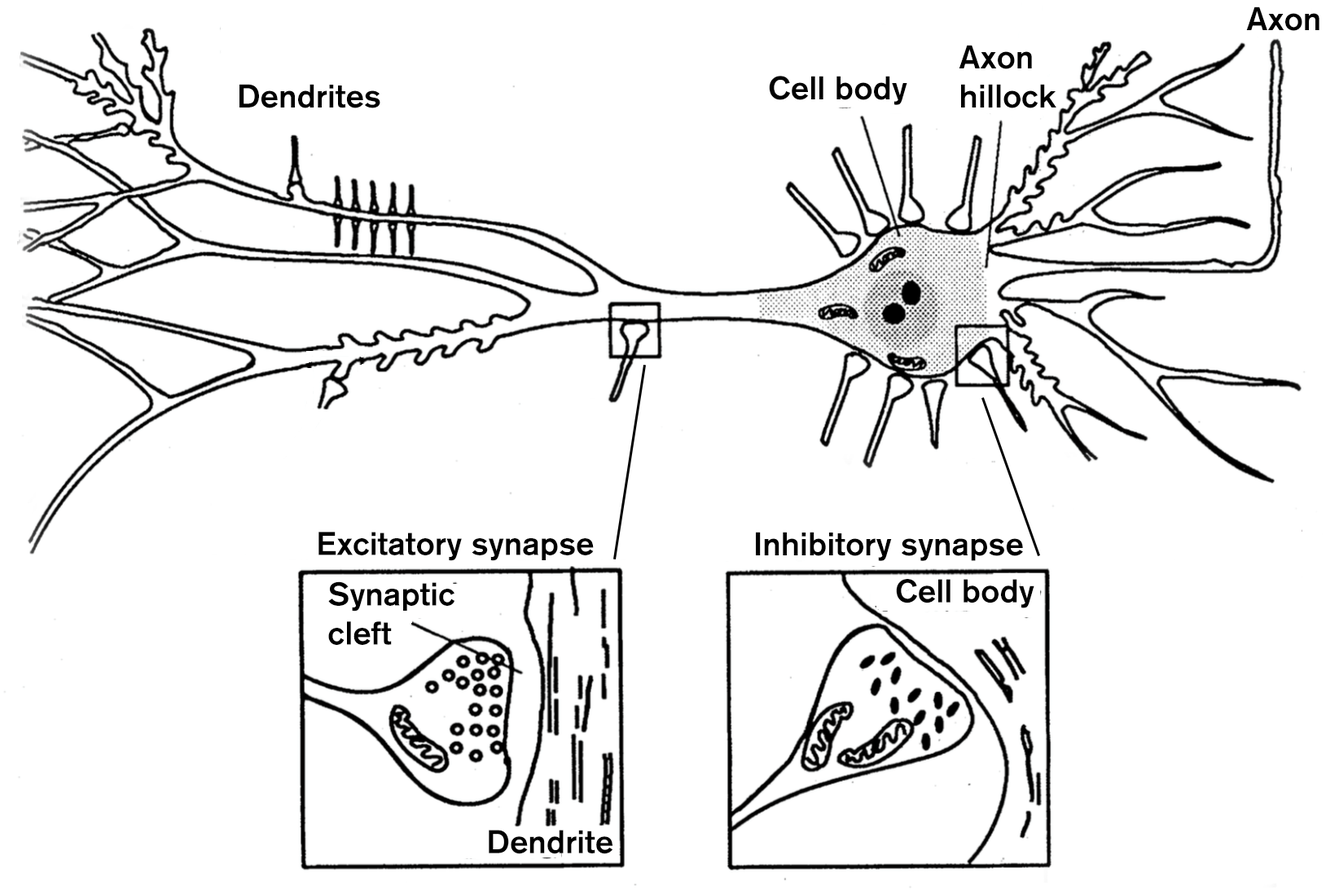
<style>
.page{position:relative;width:1339px;height:890px;background:#ffffff}
.page>*{position:absolute;margin:0}
.t1{font:32.6px "AkzidenzGroteskBQ-Medium";color:#000000}
</style>
<div class="page">
<p class="t1" style="left:1246px;top:7px;width:74px;height:24px">Axon</p>
<p class="t1" style="left:959px;top:45px;width:98px;height:63px">Axon<br>hillock</p>
<p class="t1" style="left:769px;top:76px;width:138px;height:29px">Cell body</p>
<p class="t1" style="left:239px;top:84px;width:141px;height:24px">Dendrites</p>
<p class="t1" style="left:319px;top:532px;width:275px;height:29px">Excitatory synapse</p>
<p class="t1" style="left:756px;top:532px;width:267px;height:29px">Inhibitory synapse</p>
<p class="t1" style="left:328px;top:582px;width:127px;height:63px">Synaptic <br>cleft</p>
<p class="t1" style="left:896px;top:579px;width:139px;height:30px">Cell body</p>
<p class="t1" style="left:489px;top:830px;width:124px;height:25px">Dendrite</p>
</div>
